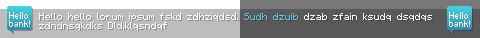
<style>
.page{position:relative;width:480px;height:38px;background:#595959}
.page>*{position:absolute;margin:0}
.t1{font:8px/9px "Minecraftia";color:#ffffff}
.t2{font:8px/9px "Minecraftia";color:#69c4e6}
</style>
<div class="page">
<p class="t1" style="left:39px;top:13px;width:393px;height:17px">Hello hello lorum ipsum fskd zdhziqdsd. <span class="t2">Sudh dzuib</span> dzab zfain ksudq dsqdqs<br>zdndnsqkdks Dld,klqsndqf</p>
</div>
